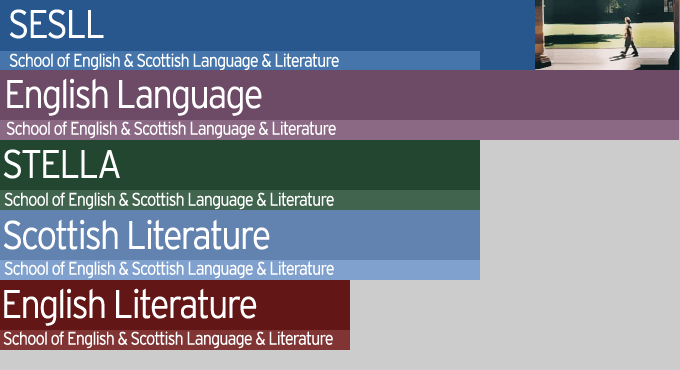
<style>
.page{position:relative;width:680px;height:370px;background:#cccccc}
.page>*{position:absolute;margin:0}
.t1{font:40px "Interstate-Light";letter-spacing:-0.05em;color:#ffffff;scale:0.9 1}
.t2{font:18px "Interstate-Light";letter-spacing:-0.05em;color:#ffffff;scale:0.9 1}
</style>
<div class="page">
<p class="t1" style="left:9px;top:9px;width:95px;height:30px">SESLL</p>
<p class="t2" style="left:9px;top:53px;width:330px;height:18px">School of English &amp; Scottish Language &amp; Literature</p>
<p class="t1" style="left:7px;top:78px;width:255px;height:38px">English Language</p>
<p class="t2" style="left:6px;top:121px;width:330px;height:18px">School of English &amp; Scottish Language &amp; Literature</p>
<p class="t1" style="left:3px;top:149px;width:117px;height:30px">STELLA</p>
<p class="t2" style="left:4px;top:192px;width:330px;height:18px">School of English &amp; Scottish Language &amp; Literature</p>
<p class="t1" style="left:3px;top:219px;width:267px;height:31px">Scottish Literature</p>
<p class="t2" style="left:4px;top:261px;width:330px;height:18px">School of English &amp; Scottish Language &amp; Literature</p>
<p class="t1" style="left:4px;top:288px;width:253px;height:38px">English Literature</p>
<p class="t2" style="left:3px;top:331px;width:330px;height:18px">School of English &amp; Scottish Language &amp; Literature</p>
</div>
